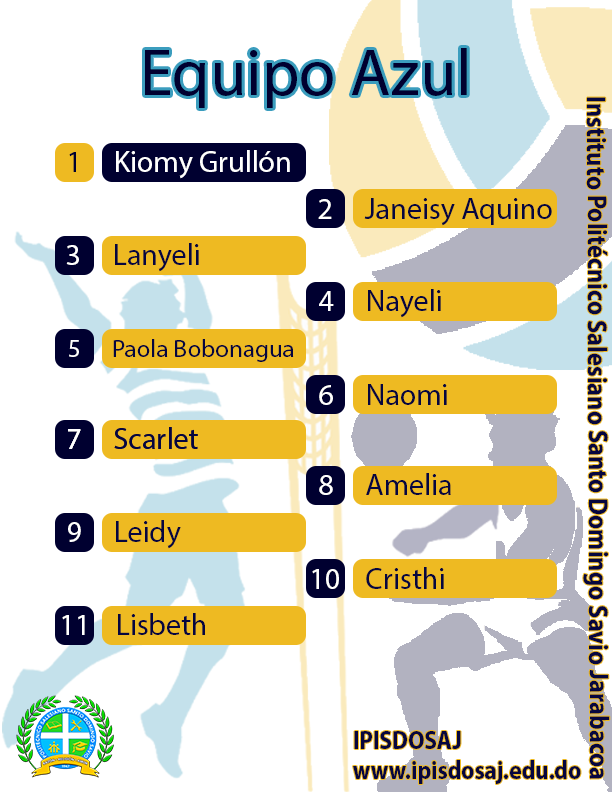
<style>
.page{position:relative;width:612px;height:792px;background:#ffffff}
.page>*{position:absolute;margin:0}
.t1{font:66.3px "MyriadPro-Regular";color:#000030}
.t2{font:27.2px "MyriadPro-Bold";color:#06063f;scale:0.9 1}
.t3{font:30px "MyriadPro-Regular";color:#ffffff}
.t4{font:30px "MyriadPro-Regular";color:#000030}
.t5{font:30px "MyriadPro-Regular";color:#06063f}
.t6{font:25px "MyriadPro-Regular";color:#06063f}
.t7{font:25px "MyriadPro-Regular";color:#ffffff}
.t8{font:25.6px "MyriadPro-Bold";color:#06063f;scale:0.9 1}
</style>
<div class="page">
<p class="t1" style="left:145px;top:48px;width:322px;height:60px">Equipo Azul</p>
<p class="t2" style="left:583px;top:97px;width:27px;height:682px;rotate:90deg">Instituto Politécnico Salesiano Santo Domingo Savio Jarabacoa</p>
<p class="t3" style="left:69px;top:150px;width:221px;height:29px"><span class="t4">1     </span>Kiomy Grullón</p>
<p class="t5" style="left:318px;top:198px;width:234px;height:28px"><span class="t3">2     </span>Janeisy Aquino</p>
<p class="t5" style="left:66px;top:243px;width:133px;height:29px"><span class="t3">3    </span> Lanyeli</p>
<p class="t5" style="left:319px;top:289px;width:122px;height:29px"><span class="t3">4     </span>Nayeli</p>
<p class="t6" style="left:69px;top:339px;width:225px;height:23px"><span class="t7">5    </span>  Paola Bobonagua</p>
<p class="t5" style="left:319px;top:384px;width:128px;height:21px"><span class="t3">6     </span>Naomi</p>
<p class="t5" style="left:68px;top:427px;width:130px;height:22px"><span class="t3">7    </span> Scarlet</p>
<p class="t5" style="left:68px;top:427px;width:130px;height:22px"><span class="t3">7    </span> Scarlet</p>
<p class="t5" style="left:319px;top:473px;width:132px;height:22px"><span class="t3">8     </span>Amelia</p>
<p class="t5" style="left:68px;top:520px;width:113px;height:29px"><span class="t3">9    </span> Leidy</p>
<p class="t5" style="left:312px;top:567px;width:132px;height:22px"><span class="t3">10    </span>Cristhi</p>
<p class="t5" style="left:62px;top:613px;width:143px;height:22px"><span class="t3">11    </span>Lisbeth</p>
<p class="t8" style="left:353px;top:731px;width:228px;height:53px">IPISDOSAJ<br>www.ipisdosaj.edu.do</p>
</div>
